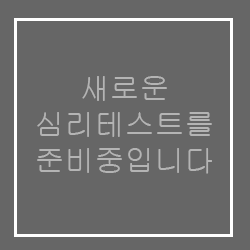
<style>
.page{position:relative;width:250px;height:250px;background:#666666}
.page>*{position:absolute;margin:0}
.t1{font:30px "Gulim";color:#b4b4b4}
</style>
<div class="page">
<p class="t1" style="left:37px;top:76px;width:175px;height:98px;text-align:center">새로운<br>심리테스트를<br>준비중입니다</p>
</div>
